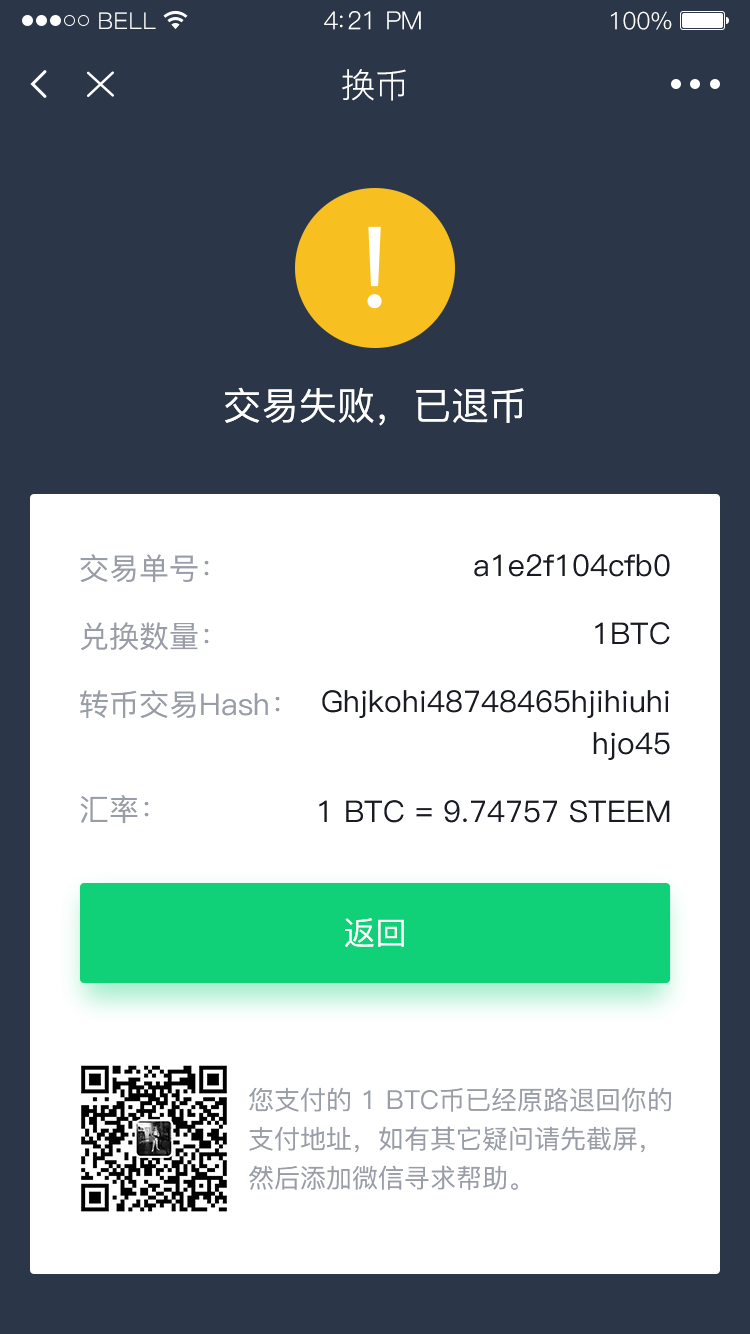
<style>
.page{position:relative;width:750px;height:1334px;background:#2b3749}
.page>*{position:absolute;margin:0}
.t1{font:23px "PingFang-SC-Regular";letter-spacing:0.02em;color:#ffffff}
.t2{font:25px "PingFang-SC-Regular";letter-spacing:-0.02em;color:#ffffff}
.t3{font:24px "PingFang-SC-Regular";letter-spacing:-0.02em;color:#ffffff}
.t4{font:34px "PingFang-SC-Regular";color:#ffffff}
.t5{font:38px "PingFang-SC-Medium";color:#ffffff}
.t6{font:30px/68px "PingFang-SC-Medium";color:#999da7}
.t7{font:30px/105px "PingFang-SC-Medium";color:#999da7}
.t8{font:30px/48px "PingFang-SC-Medium";color:#181b23}
.t9{font:30px/68px "PingFang-SC-Medium";color:#181b23}
.t10{font:30px/42px "PingFang-SC-Medium";color:#181b23}
.t11{font:32px "PingFang-SC-Medium";color:#ffffff}
.t12{font:26px/39px "PingFang-SC-Medium";color:#999da7}
</style>
<div class="page">
<p class="t1" style="left:99px;top:12px;width:57px;height:17px">BELL</p>
<p class="t2" style="left:324px;top:11px;width:97px;height:19px">4:21 PM</p>
<p class="t3" style="left:611px;top:11px;width:61px;height:19px">100%</p>
<p class="t4" style="left:342px;top:69px;width:64px;height:32px">换币</p>
<p class="t5" style="left:225px;top:387px;width:299px;height:39px">交易失败，已退币</p>
<p class="t6" style="left:80px;top:554px;width:200px;height:270px">交易单号：                        <br>兑换数量：<br>转币交易Hash：<br><span class="t7">汇</span>率：</p>
<p class="t8" style="left:319px;top:554px;width:351px;height:269px;text-align:right"><span class="t6"> </span><span class="t9">a1e2f104cfb0<br>1BTC<br>G</span>hjkohi48748465hjihiuh<span class="t10">i<br>hjo45<br></span><span class="t9">1 BTC = 9.74757 STEEM</span></p>
<p class="t11" style="left:345px;top:918px;width:59px;height:29px">返回</p>
<p class="t12" style="left:249px;top:1087px;width:422px;height:103px">您支付的 1 BTC币已经原路退回你的<br>支付地址，如有其它疑问请先截屏，<br>然后添加微信寻求帮助。</p>
</div>
